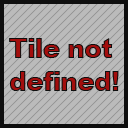
<style>
.page{position:relative;width:128px;height:128px;background:#bbbbbb}
.page>*{position:absolute;margin:0}
.t1{font:27.5px "Arial-Black";letter-spacing:-0.05em}
</style>
<div class="page">
<p class="t1" style="left:9px;top:38px;width:110px;height:53px;text-align:center">Tile not <br>defined!</p>
</div>
